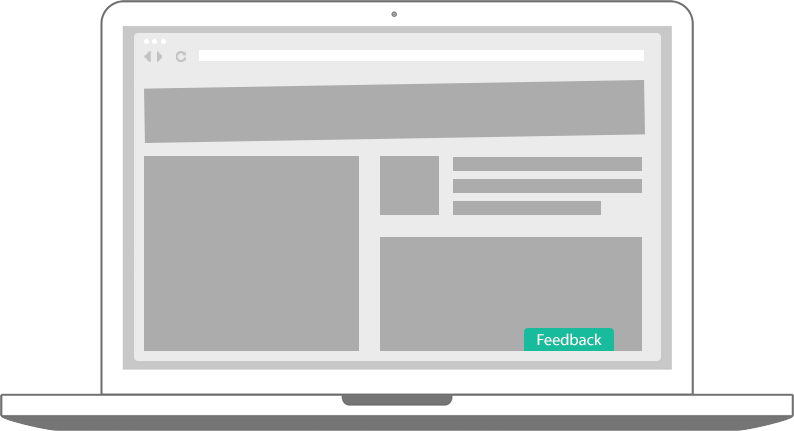
<style>
.page{position:relative;width:794px;height:431px;background:#ffffff}
.page>*{position:absolute;margin:0}
.t1{font:16px "MyriadPro-Regular";letter-spacing:0.01em;color:#ffffff}
</style>
<div class="page">
<p class="t1" style="left:537px;top:333px;width:65px;height:13px">Feedback</p>
</div>
